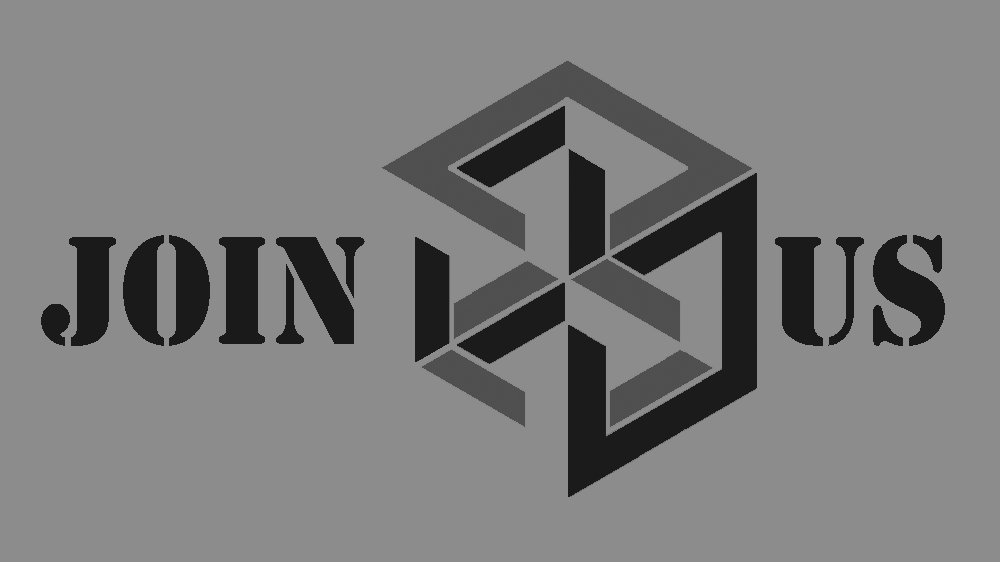
<style>
.page{position:relative;width:1000px;height:562px;background:#8c8c8c}
.page>*{position:absolute;margin:0}
.t1{font:143.6px "StencilStd";color:#1a1a1a;scale:0.91 1}
</style>
<div class="page">
<p class="t1" style="left:41px;top:235px;width:904px;height:111px">JOIN         US</p>
</div>
